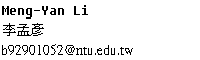
<style>
.page{position:relative;width:200px;height:60px;background:#ffffff}
.page>*{position:absolute;margin:0}
.t1{font:14px "Fixedsys";color:#000000}
.t2{font:14px "PMingLiU";color:#000000}
</style>
<div class="page">
<p class="t1" style="left:2px;top:5px;width:86px;height:14px">Meng-Yan Li</p>
<p class="t2" style="left:3px;top:23px;width:41px;height:13px">李孟彥</p>
<p class="t2" style="left:2px;top:44px;width:131px;height:11px">b92901052@ntu.edu.tw</p>
</div>
